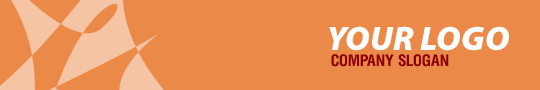
<style>
.page{position:relative;width:540px;height:90px;background:#eb8948}
.page>*{position:absolute;margin:0}
.t1{font:34px "MyriadPro-BlackIt";color:#ffffff;text-transform:uppercase}
.t2{font:16px "HeliosCondBold";color:#8b0000;text-transform:uppercase}
</style>
<div class="page">
<p class="t1" style="left:329px;top:26px;width:180px;height:25px">YOUR LOGO</p>
<p class="t2" style="left:331px;top:54px;width:118px;height:13px">company slogan</p>
</div>
